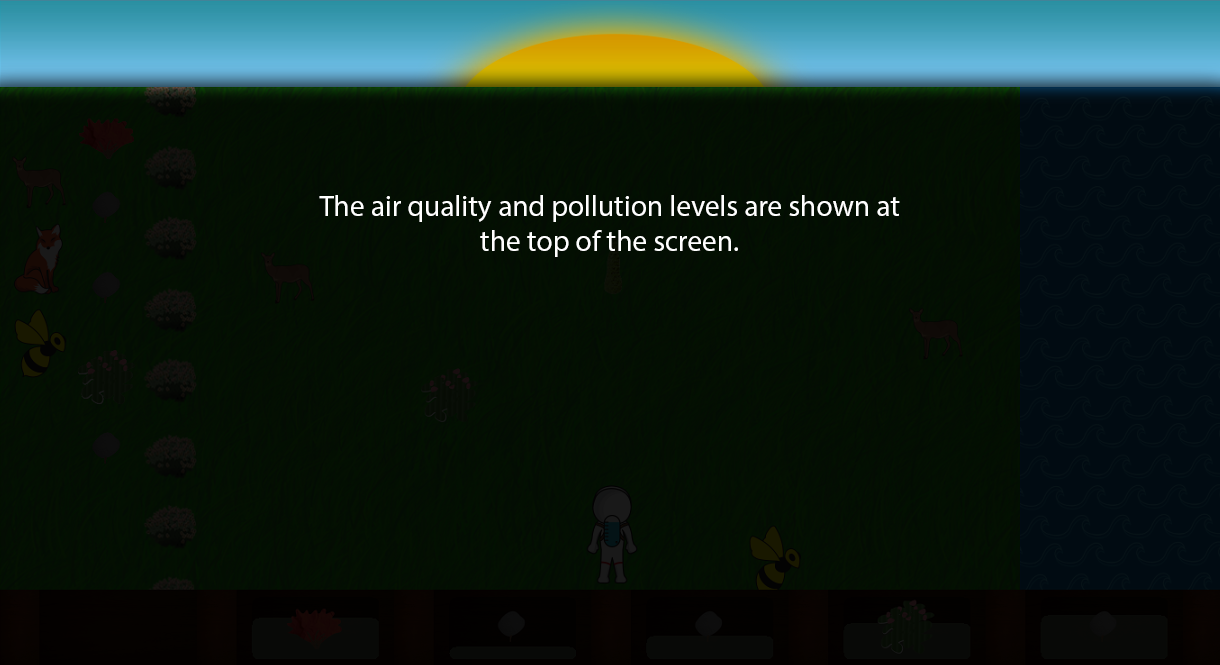
<style>
.page{position:relative;width:1220px;height:665px}
.page>*{position:absolute;margin:0}
.t1{font:29.3px "MyriadPro-Regular";color:#ffffff}
</style>
<div class="page">
<p class="t1" style="left:319px;top:195px;width:581px;height:62px;text-align:center">The air quality and pollution levels are shown at the top of the screen.</p>
</div>
